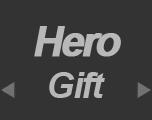
<style>
.page{position:relative;width:152px;height:120px;background:#333333}
.page>*{position:absolute;margin:0}
.t1{font:42.3px "Arial-BoldMT";letter-spacing:-0.1em;color:#b8b8b8;font-weight:bold;font-style:italic}
.t2{font:36px "Arial-BoldItalicMT";letter-spacing:-0.05em;color:#b8b8b8}
</style>
<div class="page">
<p class="t1" style="left:34px;top:26px;width:87px;height:31px">Hero</p>
<p class="t2" style="left:49px;top:72px;width:56px;height:26px">Gift</p>
</div>
